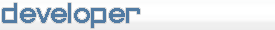
<style>
.page{position:relative;width:275px;height:30px}
.page>*{position:absolute;margin:0}
.t1{font:26px "Zeroes";color:#517ba3}
</style>
<div class="page">
<p class="t1" style="left:2px;top:3px;width:138px;height:25px">developer</p>
</div>
